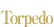
<style>
.page{position:relative;width:54px;height:27px;background:#ffffff}
.page>*{position:absolute;margin:0}
.t1{font:18px "RyuminPro-ExBold";letter-spacing:-0.1em;color:#c4a956;scale:0.88 1}
</style>
<div class="page">
<p class="t1" style="left:0px;top:10px;width:54px;height:17px">Torpedo</p>
</div>
